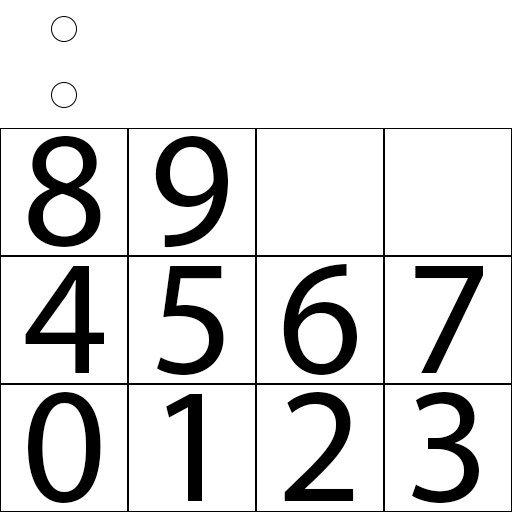
<style>
.page{position:relative;width:512px;height:512px;background:#ffffff}
.page>*{position:absolute;margin:0}
.t1{font:165px "MyriadPro-Regular";color:#000000}
</style>
<div class="page">
<p class="t1" style="left:28px;top:135px;width:73px;height:112px">8</p>
<p class="t1" style="left:155px;top:136px;width:73px;height:112px">9</p>
<p class="t1" style="left:25px;top:266px;width:79px;height:107px">4</p>
<p class="t1" style="left:157px;top:266px;width:67px;height:110px">5</p>
<p class="t1" style="left:283px;top:264px;width:74px;height:111px">6</p>
<p class="t1" style="left:415px;top:266px;width:68px;height:107px">7</p>
<p class="t1" style="left:28px;top:392px;width:73px;height:111px">0</p>
<p class="t1" style="left:166px;top:394px;width:36px;height:107px">1</p>
<p class="t1" style="left:284px;top:392px;width:70px;height:109px">2</p>
<p class="t1" style="left:412px;top:392px;width:67px;height:112px">3</p>
</div>
